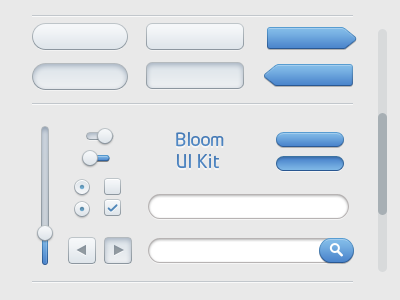
<style>
.page{position:relative;width:400px;height:300px;background:#e9e9e9}
.page>*{position:absolute;margin:0}
.t1{font:18px/10.8px "NeoTech";color:#4c83bf}
</style>
<div class="page">
<p class="t1" style="left:176px;top:132px;width:48px;height:36px">Bloom <br><br>UI Kit</p>
</div>
